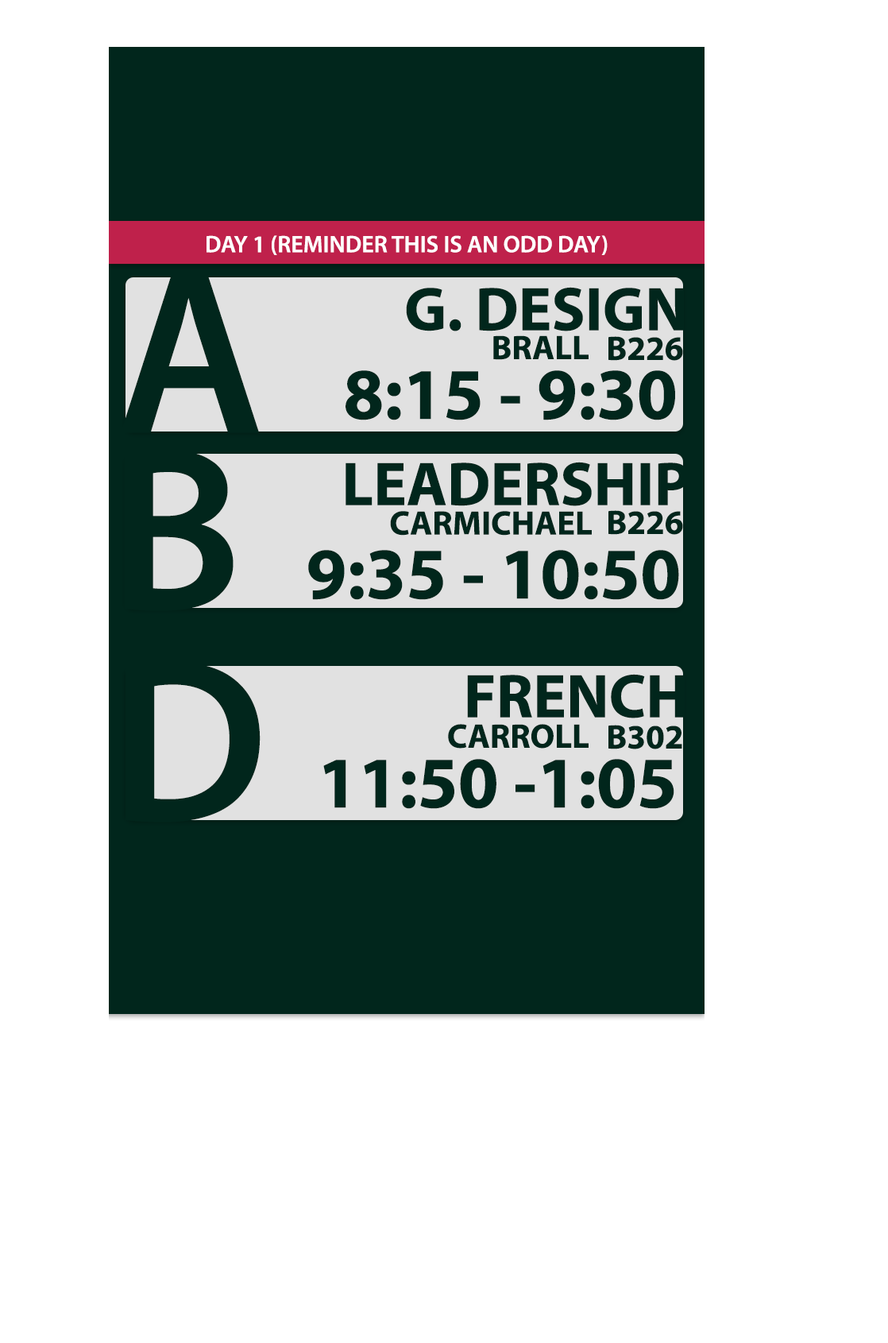
<style>
.page{position:relative;width:888px;height:1343px;background:#ffffff}
.page>*{position:absolute;margin:0}
.t1{font:23.8px "MyriadPro-Semibold";color:#ffffff}
.t2{font:233px "MyriadPro-Semibold";color:#01261c}
.t3{font:62.1px "MyriadPro-Bold";color:#01261c}
.t4{font:34.1px "MyriadPro-Bold";color:#01261c}
.t5{font:34px "MyriadPro-Bold";color:#01261c}
.t6{font:73.1px "MyriadPro-Bold";color:#01261c}
</style>
<div class="page">
<p class="t1" style="left:207px;top:235px;width:401px;height:20px">DAY 1 (REMINDER THIS IS AN ODD DAY)</p>
<p class="t2" style="left:121px;top:275px;width:138px;height:158px">A</p>
<p class="t3" style="left:406px;top:287px;width:278px;height:44px">G. DESIGN</p>
<p class="t4" style="left:493px;top:335px;width:96px;height:25px">BRALL</p>
<p class="t5" style="left:609px;top:336px;width:74px;height:25px">B226</p>
<p class="t6" style="left:346px;top:370px;width:329px;height:50px">8:15 - 9:30</p>
<p class="t2" style="left:124px;top:450px;width:110px;height:161px">B</p>
<p class="t3" style="left:346px;top:462px;width:343px;height:44px">LEADERSHIP</p>
<p class="t4" style="left:390px;top:511px;width:202px;height:24px">CARMICHAEL</p>
<p class="t5" style="left:609px;top:510px;width:74px;height:25px">B226</p>
<p class="t6" style="left:308px;top:550px;width:371px;height:50px">9:35 - 10:50</p>
<p class="t2" style="left:126px;top:662px;width:135px;height:160px">D</p>
<p class="t3" style="left:467px;top:674px;width:218px;height:44px">FRENCH</p>
<p class="t4" style="left:448px;top:724px;width:141px;height:24px">CARROLL</p>
<p class="t5" style="left:609px;top:725px;width:73px;height:24px">B302</p>
<p class="t6" style="left:323px;top:759px;width:351px;height:50px">11:50 -1:05</p>
</div>
